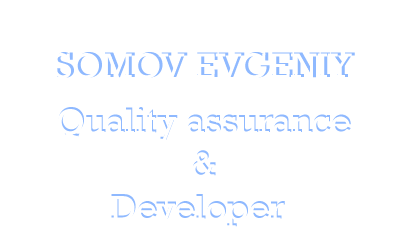
<style>
.page{position:relative;width:404px;height:250px;background:#ffffff}
.page>*{position:absolute;margin:0}
.t1{font:36px "Rockwell";color:#ffffff}
.t2{font:36px "Rockwell"}
</style>
<div class="page">
<p class="t1" style="left:54px;top:53px;width:298px;height:26px">SOMOV EVGENIY</p>
<p class="t2" style="left:57px;top:52px;width:298px;height:26px">SOMOV EVGENIY</p>
<p class="t2" style="left:58px;top:107px;width:293px;height:120px">Quality assurance<br>               &amp;<br>      Developer</p>
</div>
